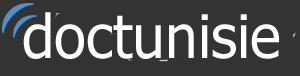
<style>
.page{position:relative;width:300px;height:76px;background:#333333}
.page>*{position:absolute;margin:0}
.t1{font:60px "Tahoma";color:#ffffff}
</style>
<div class="page">
<p class="t1" style="left:23px;top:12px;width:256px;height:47px">doctunisie</p>
</div>
